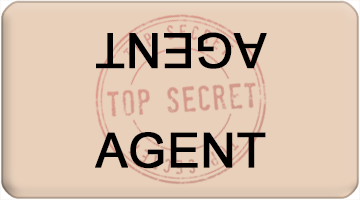
<style>
.page{position:relative;width:360px;height:200px;background:#e8d0bb}
.page>*{position:absolute;margin:0}
.t1{font:48px "ArialMT";color:#000000;font-weight:bold}
</style>
<div class="page">
<p class="t1" style="left:96px;top:32px;width:171px;height:37px;rotate:180deg">AGENT</p>
<p class="t1" style="left:95px;top:132px;width:171px;height:37px">AGENT</p>
</div>
